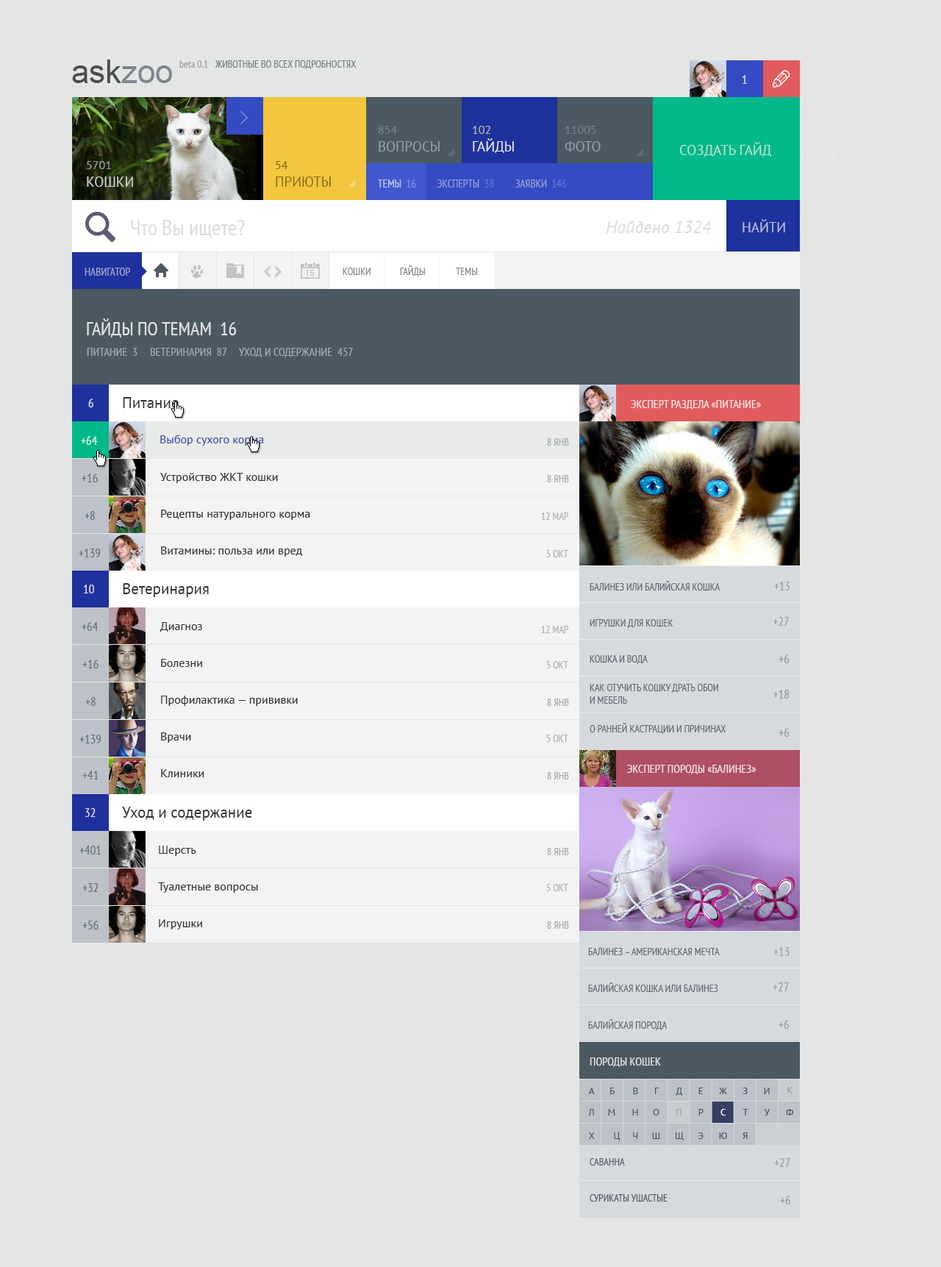
<style>
.page{position:relative;width:941px;height:1267px;background:#e4e6e5}
.page>*{position:absolute;margin:0}
.t1{font:32.4px "ArialMT"}
.t2{font:10.3px "PTSans-Narrow";color:#9a9c9b}
.t3{font:10.3px "PTSans-Narrow";color:#737d82;text-transform:uppercase}
.t4{font:12.5px "PTSans-Narrow";color:#e1e3f4}
.t5{font:14px/17.6px "PTSans-Regular";color:#989ea3;text-transform:uppercase}
.t6{font:11.8px/17.6px "PTSans-Regular";color:#989ea3;text-transform:uppercase}
.t7{font:14px/17.6px "PTSans-Regular";color:#ebecee;text-transform:uppercase}
.t8{font:11.8px/17.6px "PTSans-Regular";color:#aeaeae;text-transform:uppercase}
.t9{font:11.8px/17.6px "PTSans-Regular";text-transform:uppercase}
.t10{font:14px/17.6px "PTSans-Regular";text-transform:uppercase}
.t11{font:14px "PTSans-Regular";color:#b8e4d5;text-transform:uppercase}
.t12{font:14px/17.6px "PTSans-Regular";color:#cdcecf;text-transform:uppercase}
.t13{font:11.8px/17.6px "PTSans-Regular";color:#cdcecf;text-transform:uppercase}
.t14{font:14px/17.6px "PTSans-Regular";color:#866c1d;text-transform:uppercase}
.t15{font:11.8px/17.6px "PTSans-Regular";color:#866c1d;text-transform:uppercase}
.t16{font:11px "PTSans-Narrow";text-transform:uppercase}
.t17{font:11px "PTSans-Narrow";color:#c1c5e5;text-transform:uppercase}
.t18{font:22.1px "PTSans-Narrow";color:#dddddd}
.t19{font:17.6px "PTSans-Italic";color:#dddddd}
.t20{font:14px "PTSans-Regular";color:#bcbfdb;text-transform:uppercase}
.t21{font:11px "PTSans-Narrow";color:#9ea3cd;text-transform:uppercase}
.t22{font:10.3px "PTSans-Narrow";color:#7b848a;text-transform:uppercase}
.t23{font:19.1px "PTSans-Narrow";color:#e3e4e5;text-transform:uppercase}
.t24{font:11.8px "PTSans-Narrow";color:#a2a8ac;text-transform:uppercase}
.t25{font:12.5px "PTSans-Narrow";color:#dfe0ed}
.t26{font:15.4px "PTSans-Regular";color:#343434}
.t27{font:12.5px "PTSans-Narrow";color:#ddf2eb}
.t28{font:11.8px "PTSans-Regular";color:#414ea5}
.t29{font:10.3px "PTSans-Narrow";color:#9fa5a7;text-transform:uppercase}
.t30{font:12.5px "PTSans-Narrow";color:#67727a}
.t31{font:11.8px/36.8px "PTSans-Regular";color:#313131}
.t32{font:10.3px "PTSans-Narrow";color:#a4a9ac;text-transform:uppercase}
.t33{font:10.3px "PTSans-Narrow";color:#abb0b3;text-transform:uppercase}
</style>
<div class="page">
<p class="t1" style="left:72px;top:60px;width:100px;height:23px">askzoo</p>
<p class="t2" style="left:179px;top:60px;width:29px;height:8px">beta 0.1</p>
<p class="t3" style="left:215px;top:60px;width:142px;height:9px">животные во всех подробностях</p>
<p class="t4" style="left:742px;top:75px;width:5px;height:9px">1</p>
<p class="t5" style="left:379px;top:126px;width:61px;height:25px"><span class="t6">854<br></span>вопросы</p>
<p class="t7" style="left:473px;top:126px;width:41px;height:27px"><span class="t8">102<br></span>гайды</p>
<p class="t9" style="left:565px;top:126px;width:36px;height:25px">11005<br><span class="t10">фото</span></p>
<p class="t11" style="left:680px;top:142px;width:91px;height:15px">создать гайд</p>
<p class="t12" style="left:87px;top:161px;width:46px;height:26px"><span class="t13">5701<br></span>кошки</p>
<p class="t14" style="left:276px;top:161px;width:55px;height:26px"><span class="t15">54<br></span>приюты</p>
<p class="t16" style="left:378px;top:179px;width:189px;height:9px">темы  16         эксперты  38         заявки  146</p>
<p class="t17" style="left:378px;top:179px;width:38px;height:9px">темы  16</p>
<p class="t18" style="left:131px;top:220px;width:114px;height:18px">Что Вы ищете?</p>
<p class="t19" style="left:606px;top:221px;width:106px;height:12px">Найдено 1324</p>
<p class="t20" style="left:743px;top:219px;width:42px;height:13px">Найти</p>
<p class="t21" style="left:85px;top:268px;width:45px;height:8px">навигатор</p>
<p class="t22" style="left:343px;top:268px;width:28px;height:7px">кошки</p>
<p class="t22" style="left:400px;top:265px;width:25px;height:11px">гайды</p>
<p class="t22" style="left:456px;top:268px;width:22px;height:7px">темы</p>
<p class="t23" style="left:87px;top:318px;width:150px;height:20px">гайды по темам  16</p>
<p class="t24" style="left:87px;top:348px;width:266px;height:9px">питание  3     Ветеринария  87     уход и содержание  457</p>
<p class="t25" style="left:88px;top:399px;width:5px;height:8px">6</p>
<p class="t26" style="left:123px;top:397px;width:56px;height:11px">Питание</p>
<p class="t27" style="left:81px;top:436px;width:17px;height:9px">+64</p>
<p class="t28" style="left:160px;top:435px;width:104px;height:11px">Выбор сухого корма</p>
<p class="t29" style="left:547px;top:438px;width:22px;height:8px">8 янв</p>
<p class="t30" style="left:82px;top:474px;width:16px;height:8px">+16</p>
<p class="t31" style="left:160px;top:473px;width:150px;height:84px">Устройство ЖКТ кошки<br>Рецепты натурального корма<br>Витамины: польза или вред</p>
<p class="t32" style="left:547px;top:475px;width:22px;height:7px">8 янв</p>
<p class="t30" style="left:85px;top:511px;width:10px;height:9px">+8</p>
<p class="t33" style="left:541px;top:513px;width:28px;height:7px">12 мар</p>
<p class="t30" style="left:79px;top:549px;width:22px;height:8px">+139</p>
<p class="t33" style="left:546px;top:550px;width:22px;height:7px">5 окт</p>
<p class="t25" style="left:83px;top:585px;width:11px;height:8px">10</p>
<p class="t26" style="left:123px;top:583px;width:86px;height:14px">Ветеринария</p>
<p class="t30" style="left:82px;top:622px;width:17px;height:9px">+64</p>
<p class="t31" style="left:160px;top:622px;width:138px;height:155px">Диагноз<br>Болезни<br>Профилактика — прививки<br>Врачи<br>Клиники</p>
<p class="t33" style="left:541px;top:626px;width:28px;height:7px">12 мар</p>
<p class="t30" style="left:82px;top:660px;width:17px;height:8px">+16</p>
<p class="t33" style="left:546px;top:661px;width:22px;height:7px">5 окт</p>
<p class="t30" style="left:85px;top:697px;width:11px;height:9px">+8</p>
<p class="t32" style="left:547px;top:699px;width:22px;height:7px">8 янв</p>
<p class="t30" style="left:79px;top:735px;width:22px;height:8px">+139</p>
<p class="t33" style="left:546px;top:735px;width:22px;height:7px">5 окт</p>
<p class="t30" style="left:82px;top:771px;width:17px;height:8px">+41</p>
<p class="t32" style="left:547px;top:772px;width:22px;height:7px">8 янв</p>
<p class="t25" style="left:85px;top:808px;width:11px;height:9px">32</p>
<p class="t26" style="left:122px;top:807px;width:130px;height:14px">Уход и содержание</p>
<p class="t30" style="left:79px;top:846px;width:22px;height:8px">+401</p>
<p class="t31" style="left:158px;top:846px;width:100px;height:83px">Шерсть<br>Туалетные вопросы<br>Игрушки</p>
<p class="t32" style="left:547px;top:848px;width:22px;height:7px">8 янв</p>
<p class="t30" style="left:82px;top:883px;width:17px;height:9px">+32</p>
<p class="t33" style="left:546px;top:884px;width:22px;height:7px">5 окт</p>
<p class="t30" style="left:82px;top:921px;width:17px;height:8px">+56</p>
<p class="t32" style="left:547px;top:921px;width:22px;height:8px">8 янв</p>
</div>
